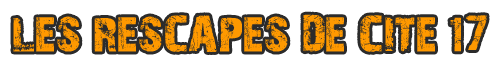
<style>
.page{position:relative;width:500px;height:70px;background:#ffffff}
.page>*{position:absolute;margin:0}
.t1{font:48px "28DaysLater";color:#ff9900}
</style>
<div class="page">
<p class="t1" style="left:13px;top:14px;width:474px;height:38px">LES RESCAPES DE CITE 17</p>
</div>
